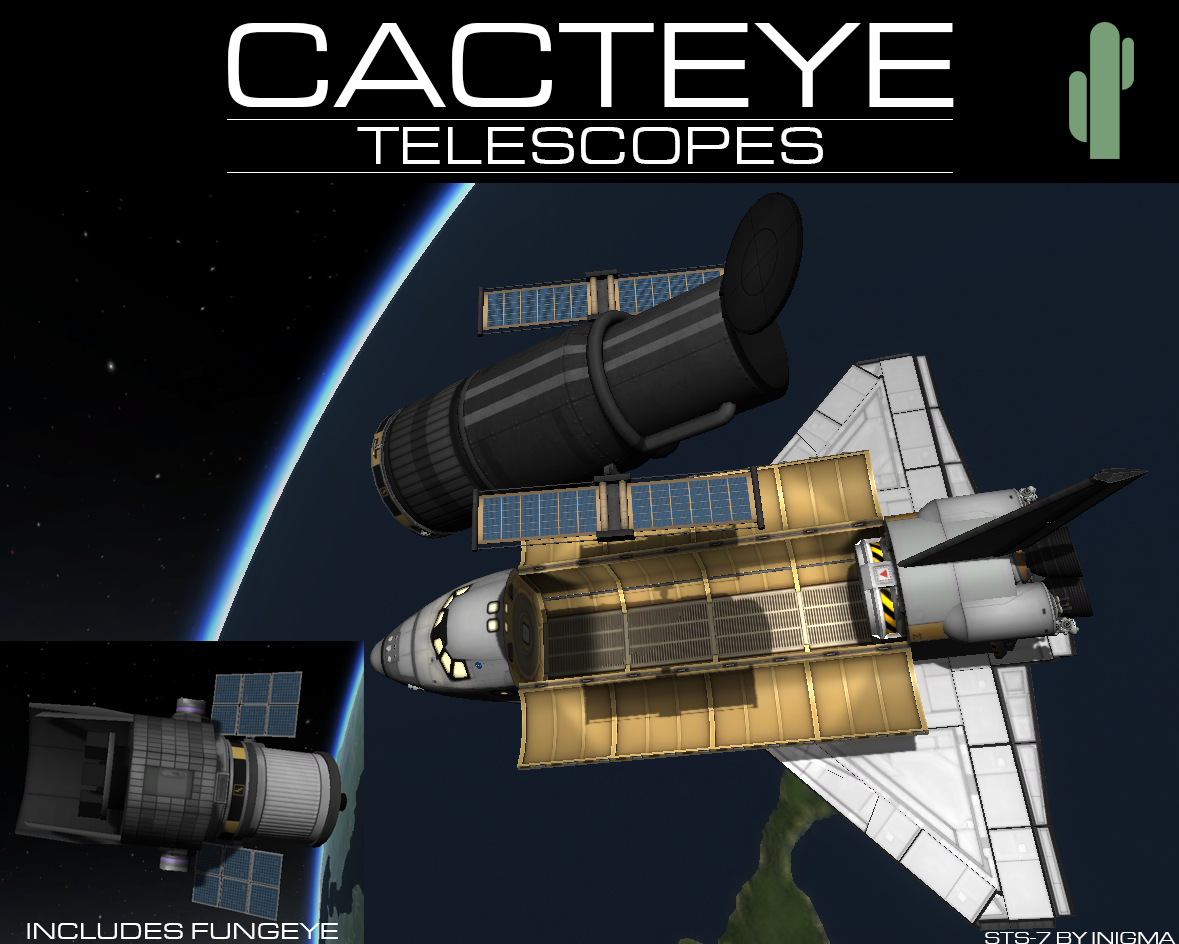
<style>
.page{position:relative;width:1179px;height:944px;background:#000000}
.page>*{position:absolute;margin:0}
.t1{font:125px "EurostileExtended-Roman";color:#ffffff}
.t2{font:54.6px "EurostileExtended-Roman";color:#ffffff}
.t3{font:24px "EurostileExtended-Roman";color:#ffffff}
.t4{font:18px "EurostileExtended-Roman";color:#ffffff}
</style>
<div class="page">
<p class="t1" style="left:228px;top:23px;width:726px;height:84px">CACTEYE</p>
<p class="t2" style="left:357px;top:127px;width:466px;height:37px">TELESCOPES</p>
<p class="t3" style="left:27px;top:923px;width:311px;height:16px">INCLUDES FUNGEYE</p>
<p class="t4" style="left:985px;top:932px;width:191px;height:12px">STS-7 BY INIGMA</p>
</div>
